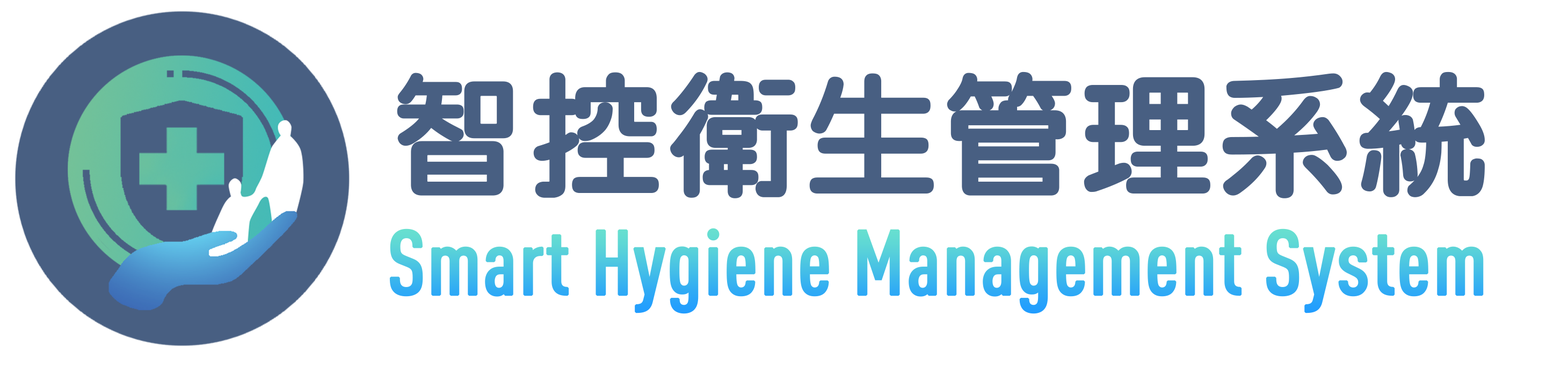
<style>
.page{position:relative;width:1568px;height:365px;background:#ffffff}
.page>*{position:absolute;margin:0}
.t1{font:134.2px "DFNYuan-MXB-HK-BF";color:#485f82;font-weight:bold}
.t2{font:89.5px "DINCond-MediumAlternate";color:#46c0e6;font-weight:bold}
</style>
<div class="page">
<p class="t1" style="left:397px;top:71px;width:1088px;height:127px">智控衛生管理系統</p>
<p class="t2" style="left:389px;top:228px;width:1095px;height:86px">Smart Hygiene Management System</p>
</div>
